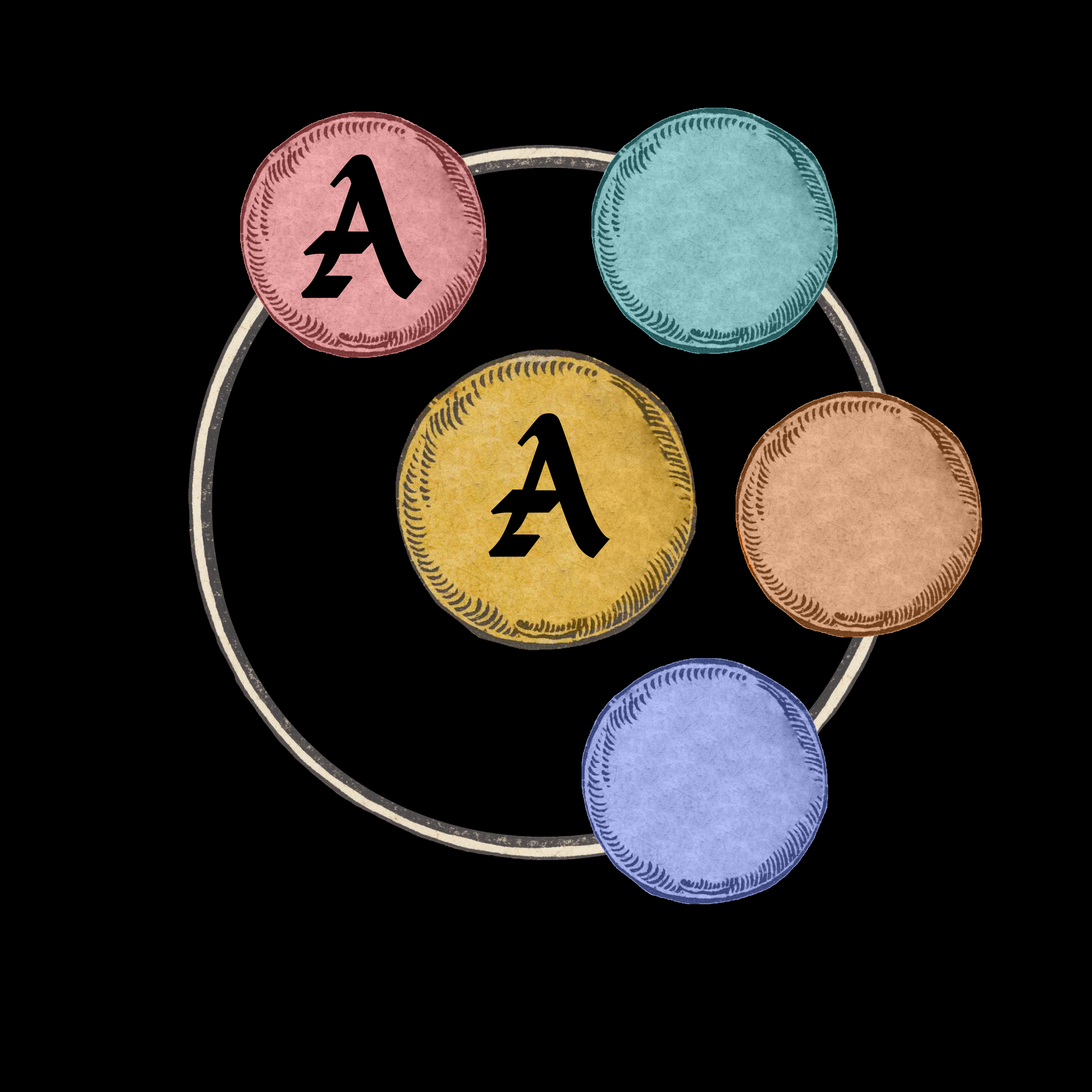
<style>
.page{position:relative;width:1092px;height:1092px;background:#000000}
.page>*{position:absolute;margin:0}
.t1{font:218.4px "KingthingsPetrock";color:#000000}
</style>
<div class="page">
<p class="t1" style="left:301px;top:154px;width:122px;height:146px">A</p>
<p class="t1" style="left:488px;top:413px;width:122px;height:145px">A</p>
</div>
